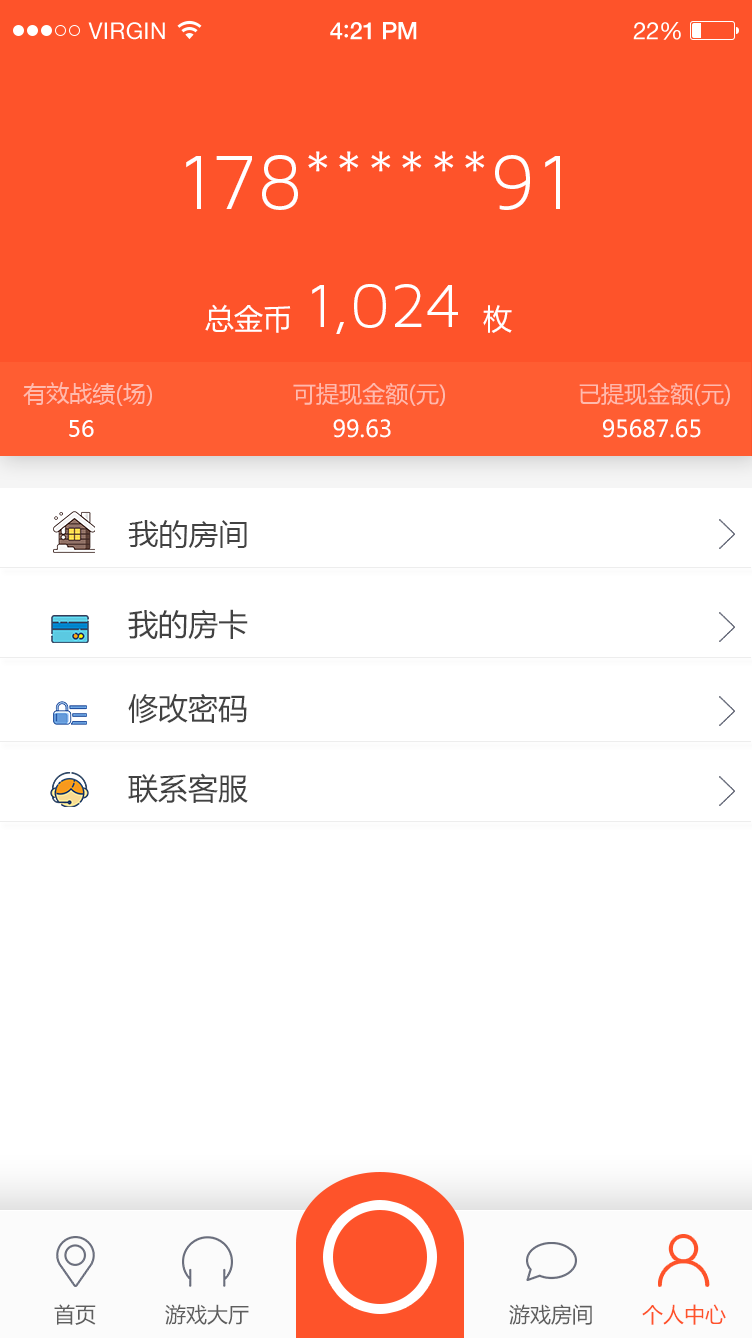
<style>
.page{position:relative;width:752px;height:1338px;background:#ffffff}
.page>*{position:absolute;margin:0}
.t1{font:23px "HelveticaNeue";letter-spacing:0.02em;color:#ffffff}
.t2{font:24px "HelveticaNeue-Medium";letter-spacing:-0.02em;color:#ffffff}
.t3{font:26px "Avenir-Medium";letter-spacing:-0.02em;color:#ffffff}
.t4{font:24px "HelveticaNeue";letter-spacing:-0.02em;color:#ffffff}
.t5{font:82px "MavenProLight300-Regular";color:#ffffff}
.t6{font:64.7px "MavenProLight300-Regular";color:#ffffff}
.t7{font:28.9px "MicrosoftYaHei";color:#ffffff}
.t8{font:23px "MicrosoftYaHei";color:#ffbaad}
.t9{font:22.9px "MicrosoftYaHei";color:#ffbaad}
.t10{font:23px "MicrosoftYaHei";color:#ffffff}
.t11{font:22.9px "MicrosoftYaHei";color:#ffffff}
.t12{font:30px "MicrosoftYaHei";color:#424242}
.t13{font:30.2px "MicrosoftYaHei";color:#424242}
.t14{font:21px "MicrosoftYaHei";color:#5e5e5e}
.t15{font:21px "MicrosoftYaHei";color:#fe532a}
</style>
<div class="page">
<p class="t1" style="left:88px;top:22px;width:77px;height:18px">VIRGIN</p>
<p class="t2" style="left:330px;top:22px;width:87px;height:18px">4<span class="t3">:</span>21 PM</p>
<p class="t4" style="left:633px;top:22px;width:48px;height:18px">22%</p>
<p class="t5" style="left:186px;top:151px;width:374px;height:59px">178******91</p>
<p class="t6" style="left:312px;top:284px;width:146px;height:50px">1,024</p>
<p class="t7" style="left:205px;top:304px;width:86px;height:29px">总金币</p>
<p class="t7" style="left:483px;top:305px;width:29px;height:28px">枚</p>
<p class="t8" style="left:23px;top:382px;width:129px;height:24px">有效战绩(场)</p>
<p class="t9" style="left:293px;top:382px;width:152px;height:24px">可提现金额(元)</p>
<p class="t9" style="left:579px;top:382px;width:151px;height:24px">已提现金额(元)</p>
<p class="t10" style="left:69px;top:420px;width:25px;height:17px">56</p>
<p class="t11" style="left:333px;top:419px;width:58px;height:19px">99.63</p>
<p class="t11" style="left:603px;top:419px;width:98px;height:19px">95687.65</p>
<p class="t12" style="left:128px;top:520px;width:119px;height:28px">我的房间</p>
<p class="t13" style="left:128px;top:609px;width:120px;height:31px">我的房卡</p>
<p class="t13" style="left:128px;top:693px;width:119px;height:31px">修改密码</p>
<p class="t13" style="left:128px;top:773px;width:120px;height:30px">联系客服</p>
<p class="t14" style="left:54px;top:1304px;width:42px;height:21px">首页</p>
<p class="t14" style="left:165px;top:1304px;width:84px;height:21px">游戏大厅</p>
<p class="t14" style="left:509px;top:1304px;width:83px;height:21px">游戏房间</p>
<p class="t15" style="left:642px;top:1304px;width:84px;height:21px">个人中心</p>
</div>
